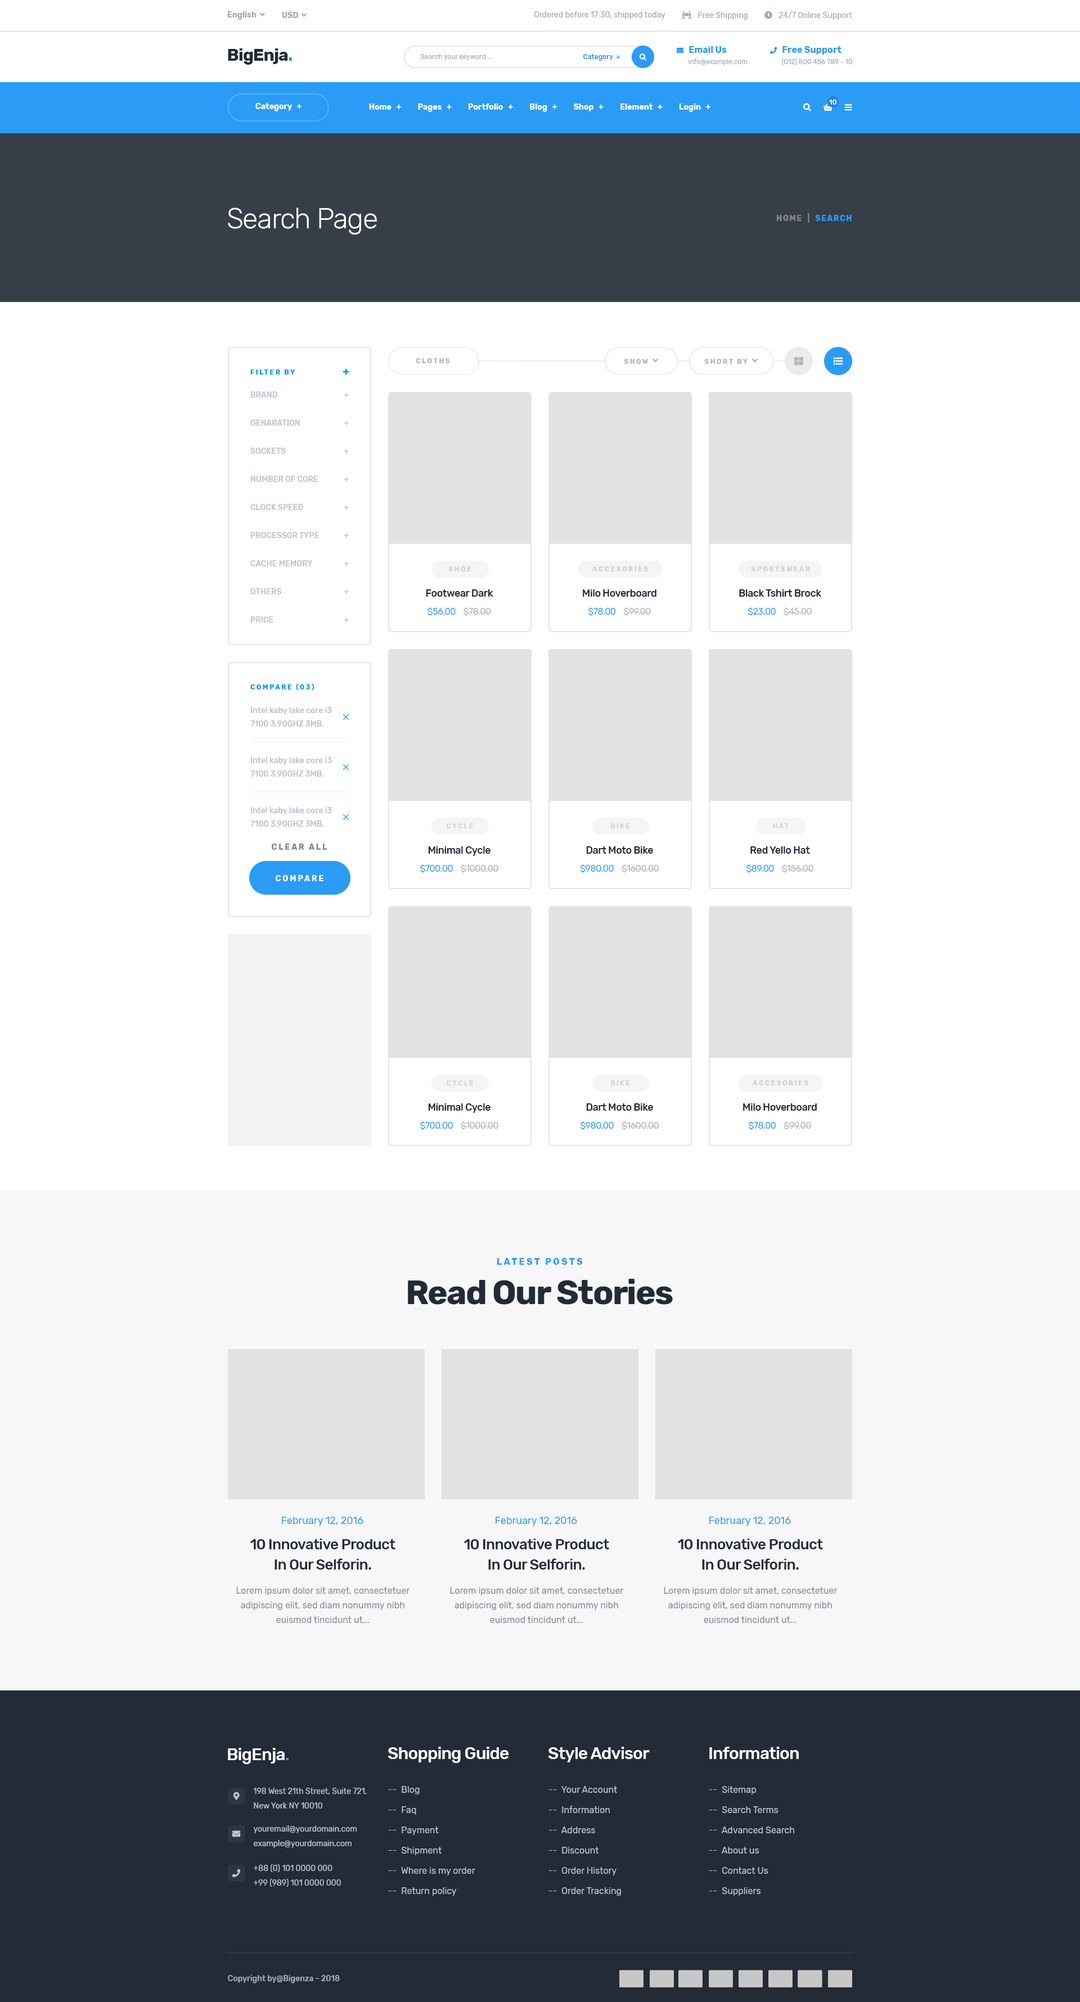
<style>
.page{position:relative;width:1080px;height:2002px;background:#ffffff}
.page>*{position:absolute;margin:0}
.t1{font:7.9px "Rubik-Regular";color:#a2aab6}
.t2{font:16.9px "Rubik-Bold";letter-spacing:-0.03em;color:#232b37}
.t3{font:16.9px "Rubik-Bold";letter-spacing:-0.03em;color:#2a9cf5}
.t4{font:6.8px "Rubik-Regular";color:#a2aab6}
.t5{font:6.8px "Rubik-Medium";color:#2a9cf5}
.t6{font:6.8px/11.2px "Rubik-Regular";color:#a2aab6}
.t7{font:6.8px/11.2px "FontAwesome5FreeSolid";color:#2a9cf5}
.t8{font:9px/11.2px "Rubik-Bold";color:#2a9cf5}
.t9{font:6.8px "Rubik-Medium";color:#ffffff}
.t10{font:7.9px "Rubik-Bold";color:#ffffff}
.t11{font:28.1px "Rubik-Light";letter-spacing:-0.03em;color:#ffffff}
.t12{font:7.9px "Rubik-Bold";letter-spacing:0.1em;color:#848792;text-transform:uppercase}
.t13{font:7.9px "Rubik-Bold";letter-spacing:0.1em;color:#2a9cf5;text-transform:uppercase}
.t14{font:6.8px "Rubik-Bold";letter-spacing:0.2em;color:#b1b6bd;text-transform:uppercase}
.t15{font:6.8px "Rubik-Bold";letter-spacing:0.2em;color:#009be0;text-transform:uppercase}
.t16{font:7.9px/28.1px "Rubik-Medium";color:#bbc4d1;text-transform:uppercase}
.t17{font:6.8px "Rubik-Bold";letter-spacing:0.2em;color:#d1d0d0;text-transform:uppercase}
.t18{font:10.1px "Rubik-Medium";letter-spacing:-0.03em;color:#232b37}
.t19{font:9px "Rubik-Regular";letter-spacing:-0.03em;color:#2a9cf5}
.t20{font:9px "Rubik-Regular";letter-spacing:-0.03em;color:#b0b5bc}
.t21{font:7.9px/13.5px "Rubik-Medium";color:#bbc4d1}
.t22{font:6.8px "Rubik-Medium";letter-spacing:0.2em;color:#d1d0d0;text-transform:uppercase}
.t23{font:7.9px "Rubik-Bold";letter-spacing:0.2em;color:#7a8591;text-transform:uppercase}
.t24{font:7.9px "Rubik-Bold";letter-spacing:0.2em;color:#ffffff;text-transform:uppercase}
.t25{font:33.8px/39.4px "Rubik-Bold";letter-spacing:-0.03em;color:#232b37}
.t26{font:9px/39.4px "Rubik-Bold";letter-spacing:0.2em;color:#2a9cf5;text-transform:uppercase}
.t27{font:10.1px "Rubik-Regular";color:#2a9cf5}
.t28{font:14.6px/20.2px "Rubik-Medium";letter-spacing:-0.03em;color:#232b37}
.t29{font:9px/14.6px "Rubik-Regular";color:#838b97}
.t30{font:16.9px "Rubik-Medium";letter-spacing:-0.03em;color:#ffffff}
.t31{font:16.9px "Rubik-Medium";letter-spacing:-0.03em;color:#2a9cf5}
.t32{font:7.9px/14.6px "Rubik-Regular";color:#c1c6ce}
.t33{font:9px/20.2px "Rubik-Regular";color:#c1c6ce}
.t34{font:7.9px "Rubik-Medium";color:#a4abb6}
</style>
<div class="page">
<p class="t1" style="left:534px;top:11px;width:131px;height:8px">Ordered before 17:30, shipped today</p>
<p class="t2" style="left:228px;top:48px;width:64px;height:17px">BigEnja<span class="t3">.</span></p>
<p class="t4" style="left:420px;top:54px;width:72px;height:6px">Search your keyword....</p>
<p class="t5" style="left:583px;top:54px;width:37px;height:7px">Category  +</p>
<p class="t6" style="left:770px;top:46px;width:82px;height:19px"><span class="t7">phone  </span><span class="t8">Free Support<br>      </span> (012) 800 456 789 - 10</p>
<p class="t9" style="left:829px;top:100px;width:8px;height:5px">10</p>
<p class="t10" style="left:255px;top:103px;width:47px;height:8px">Category   +</p>
<p class="t10" style="left:369px;top:104px;width:341px;height:8px">Home   +          Pages   +          Portfolio   +          Blog   +          Shop   +          Element   +          Login   +</p>
<p class="t11" style="left:228px;top:208px;width:149px;height:27px">Search Page</p>
<p class="t12" style="left:777px;top:213px;width:75px;height:10px">home  |  <span class="t13">search</span></p>
<p class="t14" style="left:416px;top:358px;width:34px;height:5px">cloths</p>
<p class="t15" style="left:250px;top:370px;width:45px;height:5px">FILTER BY</p>
<p class="t16" style="left:250px;top:392px;width:69px;height:231px">BRAND<br>GENARATION<br>SOCKETs<br>NUMBER OF CORE<br>CLOCK SPEED<br>PROCESSOR TYPE<br>CACHE MEMORY<br>OTHERS<br>PRICE</p>
<p class="t16" style="left:344px;top:393px;width:5px;height:229px;text-align:right">+<br>+<br>+<br>+<br>+<br>+<br>+<br>+<br>+</p>
<p class="t17" style="left:448px;top:566px;width:23px;height:6px">shoe</p>
<p class="t17" style="left:592px;top:566px;width:56px;height:6px">accesories</p>
<p class="t17" style="left:751px;top:566px;width:59px;height:6px">Sportswear</p>
<p class="t18" style="left:426px;top:590px;width:67px;height:7px">Footwear Dark</p>
<p class="t18" style="left:583px;top:590px;width:73px;height:7px">Milo Hoverboard</p>
<p class="t18" style="left:739px;top:590px;width:82px;height:7px">Black Tshirt Brock</p>
<p class="t19" style="left:428px;top:608px;width:63px;height:8px">$56.00    <span class="t20">$78.00</span></p>
<p class="t19" style="left:588px;top:608px;width:63px;height:8px">$78.00    <span class="t20">$99.00</span></p>
<p class="t19" style="left:748px;top:608px;width:64px;height:8px">$23.00    <span class="t20">$45.00</span></p>
<p class="t15" style="left:250px;top:684px;width:64px;height:6px">COMPARE (03)</p>
<p class="t21" style="left:250px;top:707px;width:82px;height:20px">Intel kaby lake core i3<br>7100 3.90GHZ 3MB.</p>
<p class="t21" style="left:250px;top:757px;width:82px;height:20px">Intel kaby lake core i3<br>7100 3.90GHZ 3MB.</p>
<p class="t21" style="left:250px;top:807px;width:82px;height:20px">Intel kaby lake core i3<br>7100 3.90GHZ 3MB.</p>
<p class="t22" style="left:447px;top:824px;width:26px;height:5px">cycle</p>
<p class="t22" style="left:611px;top:824px;width:19px;height:5px">Bike</p>
<p class="t22" style="left:773px;top:824px;width:16px;height:5px">hat</p>
<p class="t23" style="left:272px;top:844px;width:55px;height:6px">Clear All</p>
<p class="t18" style="left:428px;top:847px;width:62px;height:9px">Minimal Cycle</p>
<p class="t18" style="left:586px;top:847px;width:67px;height:7px">Dart Moto Bike</p>
<p class="t18" style="left:750px;top:847px;width:60px;height:7px">Red Yello Hat</p>
<p class="t20" style="left:420px;top:865px;width:78px;height:8px"><span class="t19">$700.00    </span>$1000.00</p>
<p class="t20" style="left:580px;top:865px;width:79px;height:8px"><span class="t19">$980.00    </span>$1600.00</p>
<p class="t20" style="left:746px;top:865px;width:68px;height:8px"><span class="t19">$89.00    </span>$156.00</p>
<p class="t24" style="left:276px;top:875px;width:47px;height:6px">compare</p>
<p class="t22" style="left:447px;top:1081px;width:26px;height:5px">cycle</p>
<p class="t22" style="left:611px;top:1081px;width:19px;height:5px">Bike</p>
<p class="t17" style="left:753px;top:1081px;width:55px;height:5px">accesories</p>
<p class="t18" style="left:428px;top:1104px;width:62px;height:9px">Minimal Cycle</p>
<p class="t18" style="left:586px;top:1104px;width:67px;height:7px">Dart Moto Bike</p>
<p class="t18" style="left:743px;top:1104px;width:74px;height:7px">Milo Hoverboard</p>
<p class="t20" style="left:420px;top:1122px;width:78px;height:8px"><span class="t19">$700.00    </span>$1000.00</p>
<p class="t20" style="left:580px;top:1122px;width:79px;height:8px"><span class="t19">$980.00    </span>$1600.00</p>
<p class="t19" style="left:749px;top:1122px;width:63px;height:8px">$78.00    <span class="t20">$99.00</span></p>
<p class="t25" style="left:408px;top:1258px;width:265px;height:47px;text-align:center"><span class="t26">Latest Posts<br></span>Read Our Stories</p>
<p class="t27" style="left:282px;top:1517px;width:81px;height:10px">February 12, 2016</p>
<p class="t27" style="left:496px;top:1517px;width:81px;height:10px">February 12, 2016</p>
<p class="t27" style="left:709px;top:1517px;width:82px;height:10px">February 12, 2016</p>
<p class="t28" style="left:250px;top:1539px;width:145px;height:31px;text-align:center">10 Innovative Product<br>In Our Selforin.</p>
<p class="t28" style="left:464px;top:1539px;width:145px;height:31px;text-align:center">10 Innovative Product<br>In Our Selforin.</p>
<p class="t28" style="left:678px;top:1539px;width:145px;height:31px;text-align:center">10 Innovative Product<br>In Our Selforin.</p>
<p class="t29" style="left:236px;top:1587px;width:174px;height:36px;text-align:center">Lorem ipsum dolor sit amet, consectetuer<br>adipiscing elit, sed diam nonummy nibh<br>euismod tincidunt ut...</p>
<p class="t29" style="left:450px;top:1587px;width:174px;height:36px;text-align:center">Lorem ipsum dolor sit amet, consectetuer<br>adipiscing elit, sed diam nonummy nibh<br>euismod tincidunt ut...</p>
<p class="t29" style="left:664px;top:1587px;width:174px;height:36px;text-align:center">Lorem ipsum dolor sit amet, consectetuer<br>adipiscing elit, sed diam nonummy nibh<br>euismod tincidunt ut...</p>
<p class="t30" style="left:228px;top:1748px;width:61px;height:17px">BigEnja<span class="t31">.</span></p>
<p class="t30" style="left:388px;top:1747px;width:121px;height:16px">Shopping Guide</p>
<p class="t30" style="left:548px;top:1747px;width:102px;height:16px">Style Advisor</p>
<p class="t30" style="left:709px;top:1747px;width:90px;height:13px">Information</p>
<p class="t32" style="left:253px;top:1788px;width:114px;height:21px">198 West 21th Street, Suite 721,<br>New York NY 10010</p>
<p class="t33" style="left:388px;top:1786px;width:87px;height:110px">--  Blog<br>--  Faq<br>--  Payment<br>--  Shipment<br>--  Where is my order<br>--  Return policy</p>
<p class="t33" style="left:548px;top:1786px;width:73px;height:110px">--  Your Account<br>--  Information<br>--  Address<br>--  Discount<br>--  Order History<br>--  Order Tracking</p>
<p class="t33" style="left:709px;top:1786px;width:85px;height:110px">--  Sitemap<br>--  Search Terms<br>--  Advanced Search<br>--  About us<br>--  Contact Us<br>--  Suppliers</p>
<p class="t32" style="left:253px;top:1826px;width:104px;height:22px">youremail@yourdomain.com<br>example@yourdomain.com</p>
<p class="t32" style="left:254px;top:1865px;width:87px;height:22px">+88 (0) 101 0000 000<br>+99 (989) 101 0000 000</p>
<p class="t34" style="left:228px;top:1976px;width:112px;height:8px">Copyright by@Bigenza - 2018</p>
</div>
